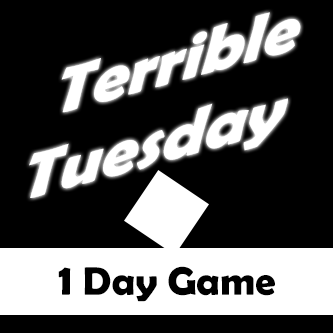
<style>
.page{position:relative;width:333px;height:333px;background:#000000}
.page>*{position:absolute;margin:0}
.t1{font:72px "BerlinSansFBDemi-Bold";color:#ffffff}
.t2{font:40.1px "BerlinSansFBDemi-Bold";color:#000000}
.t3{font:44.1px "BerlinSansFBDemi-Bold";color:#000000}
</style>
<div class="page">
<p class="t1" style="left:29px;top:12px;width:272px;height:186px;text-align:center;rotate:-15deg">Terrible<br>Tuesday</p>
<p class="t2" style="left:58px;top:266px;width:217px;height:36px"><span class="t3">1</span> Day Game</p>
</div>
